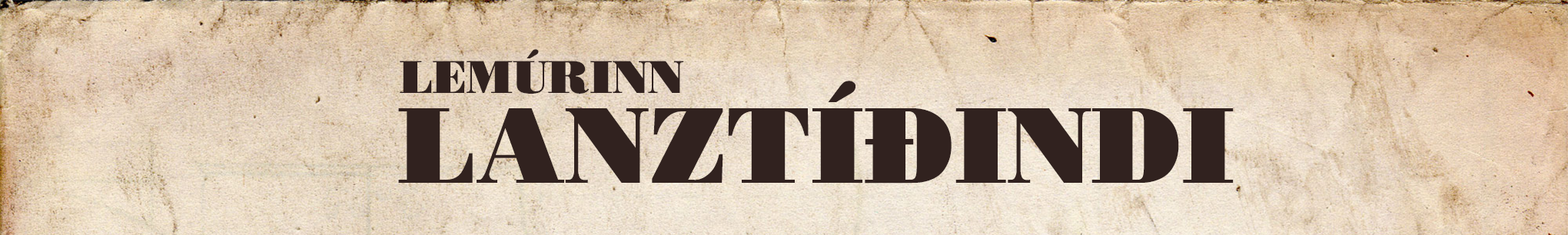
<style>
.page{position:relative;width:1568px;height:235px}
.page>*{position:absolute;margin:0}
.t1{font:46.1px "Bodoni-Poster";color:#31221f}
.t2{font:107.6px "Bodoni-Poster";color:#31221f}
</style>
<div class="page">
<p class="t1" style="left:400px;top:49px;width:284px;height:45px">LEMÚRINN</p>
<p class="t2" style="left:398px;top:81px;width:836px;height:103px">LANZTÍÐINDI</p>
</div>
